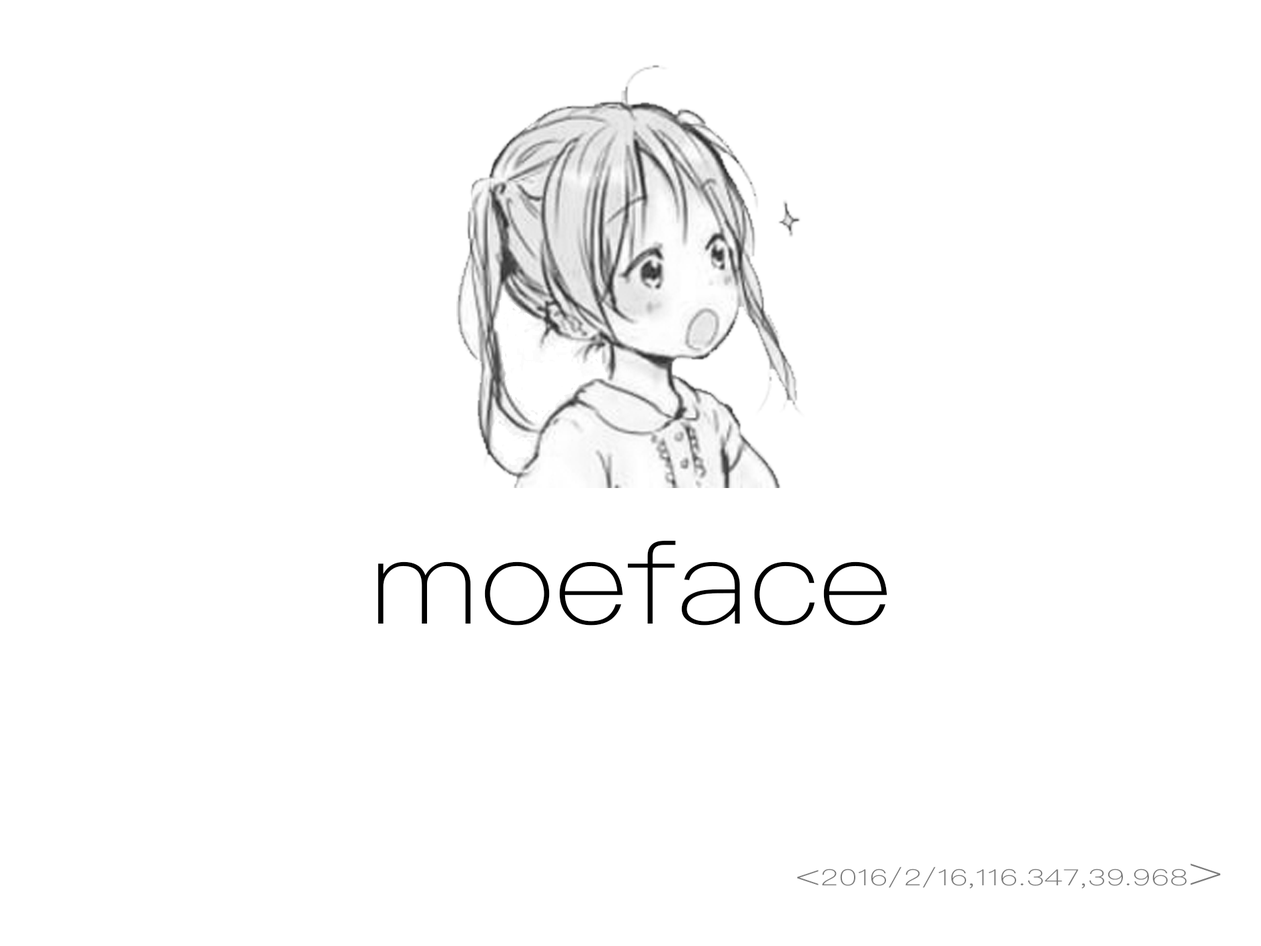
<style>
.page{position:relative;width:1261px;height:946px;background:#ffffff}
.page>*{position:absolute;margin:0}
.t1{font:115.8px "PingFangSC-Thin";color:#000000;scale:1.15 1}
.t2{font:22.1px "PingFangSC-Thin";color:#7a7a7a;scale:1.4 1}
.t3{font:29.5px "PingFangSC-Thin";color:#7a7a7a;scale:1.4 1}
.t4{font:42.2px "PingFangSC-Thin";color:#7a7a7a;scale:1.4 1}
</style>
<div class="page">
<p class="t1" style="left:378px;top:540px;width:509px;height:85px">moeface</p>
<p class="t2" style="left:797px;top:863px;width:423px;height:25px"><span class="t3">&lt;</span>2016/2/16,116.347,39.968<span class="t4">&gt;</span></p>
</div>
